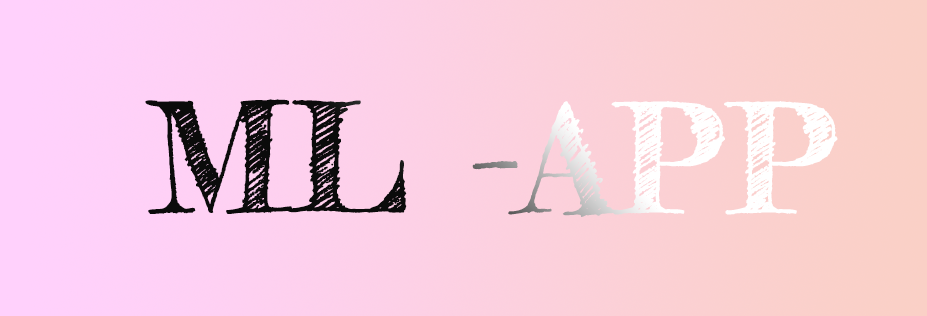
<style>
.page{position:relative;width:927px;height:316px}
.page>*{position:absolute;margin:0}
.t1{font:150px "FrederickatheGreatest";font-weight:bold}
</style>
<div class="page">
<p class="t1" style="left:145px;top:99px;width:693px;height:118px">ML -APP</p>
</div>
